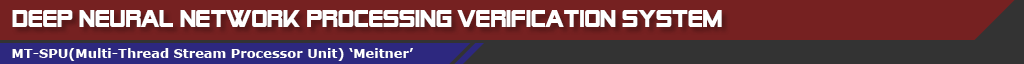
<style>
.page{position:relative;width:1024px;height:64px;background:#762121}
.page>*{position:absolute;margin:0}
.t1{font:24px "AlienEncountersSolidBold";color:#ffffff}
.t2{font:13px "Verdana-Bold";color:#ffffff}
</style>
<div class="page">
<p class="t1" style="left:12px;top:10px;width:710px;height:17px">DeeP NEURAL NETWORK PROCESSING VERIFICATION SYSTEM</p>
<p class="t2" style="left:12px;top:48px;width:401px;height:13px">MT-SPU(Multi-Thread Stream Processor Unit) ‘Meitner’</p>
</div>
